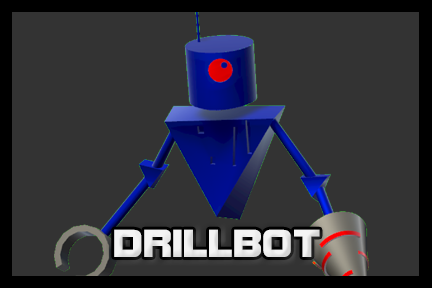
<style>
.page{position:relative;width:432px;height:288px;background:#333333}
.page>*{position:absolute;margin:0}
.t1{font:41.7px "BolsterBold";color:#f3f3f3}
</style>
<div class="page">
<p class="t1" style="left:114px;top:229px;width:206px;height:28px">DRILLBOT</p>
</div>
